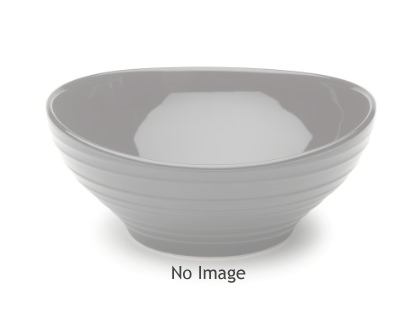
<style>
.page{position:relative;width:420px;height:325px;background:#ffffff}
.page>*{position:absolute;margin:0}
.t1{font:18px "TrebuchetMS";color:#464544}
</style>
<div class="page">
<p class="t1" style="left:172px;top:266px;width:74px;height:17px">No Image</p>
</div>
